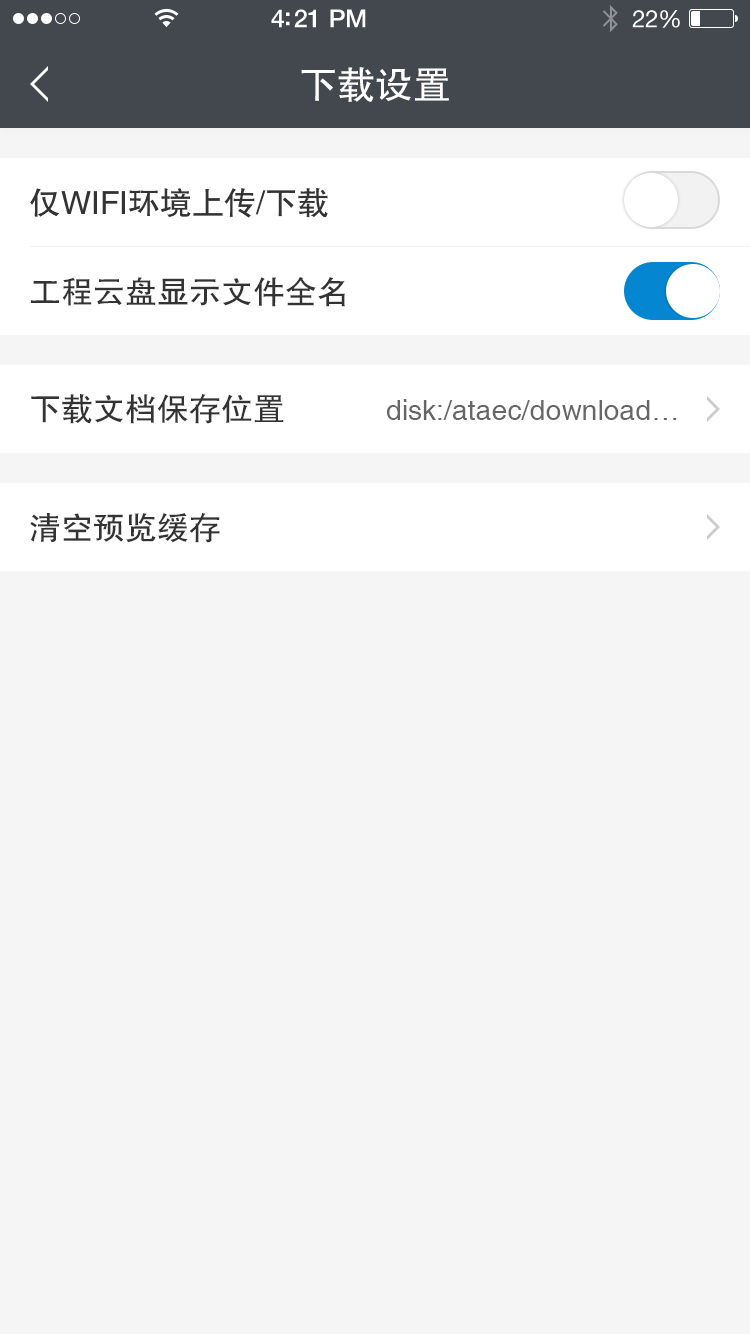
<style>
.page{position:relative;width:750px;height:1334px;background:#f5f5f5}
.page>*{position:absolute;margin:0}
.t1{font:38px "FZHTJW--GB1-0";color:#ffffff}
.t2{font:32px "FZHTJW--GB1-0";color:#333333}
.t3{font:32.1px "FZHTJW--GB1-0";color:#333333}
.t4{font:28px "Helvetica";color:#666666}
</style>
<div class="page">
<p class="t1" style="left:301px;top:67px;width:148px;height:35px">下载设置</p>
<p class="t2" style="left:30px;top:188px;width:298px;height:30px">仅WIFI环境上传/下载</p>
<p class="t3" style="left:31px;top:277px;width:314px;height:30px">工程云盘显示文件全名</p>
<p class="t3" style="left:31px;top:394px;width:253px;height:30px">下载文档保存位置</p>
<p class="t4" style="left:387px;top:399px;width:290px;height:21px">disk:/ataec/download…</p>
<p class="t3" style="left:30px;top:513px;width:190px;height:30px">清空预览缓存</p>
</div>
